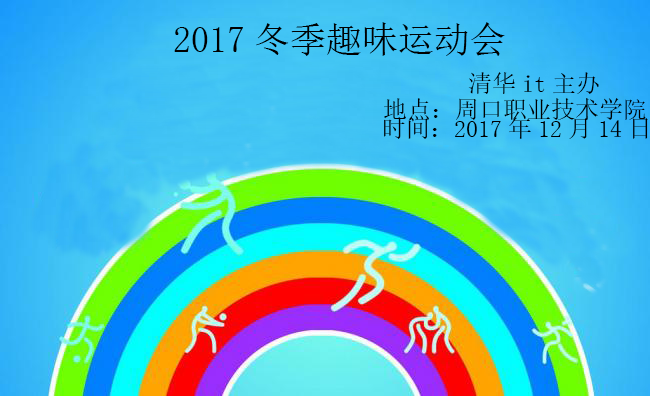
<style>
.page{position:relative;width:650px;height:396px}
.page>*{position:absolute;margin:0}
.t1{font:36px "SimSun";color:#000000}
.t2{font:24px "SimSun";color:#000000}
</style>
<div class="page">
<p class="t1" style="left:174px;top:22px;width:331px;height:34px">2017冬季趣味运动会</p>
<p class="t2" style="left:468px;top:72px;width:131px;height:22px">清华it主办</p>
<p class="t2" style="left:384px;top:98px;width:262px;height:22px">地点：周口职业技术学院</p>
<p class="t2" style="left:384px;top:117px;width:264px;height:22px">时间：2017年12月14日</p>
</div>
